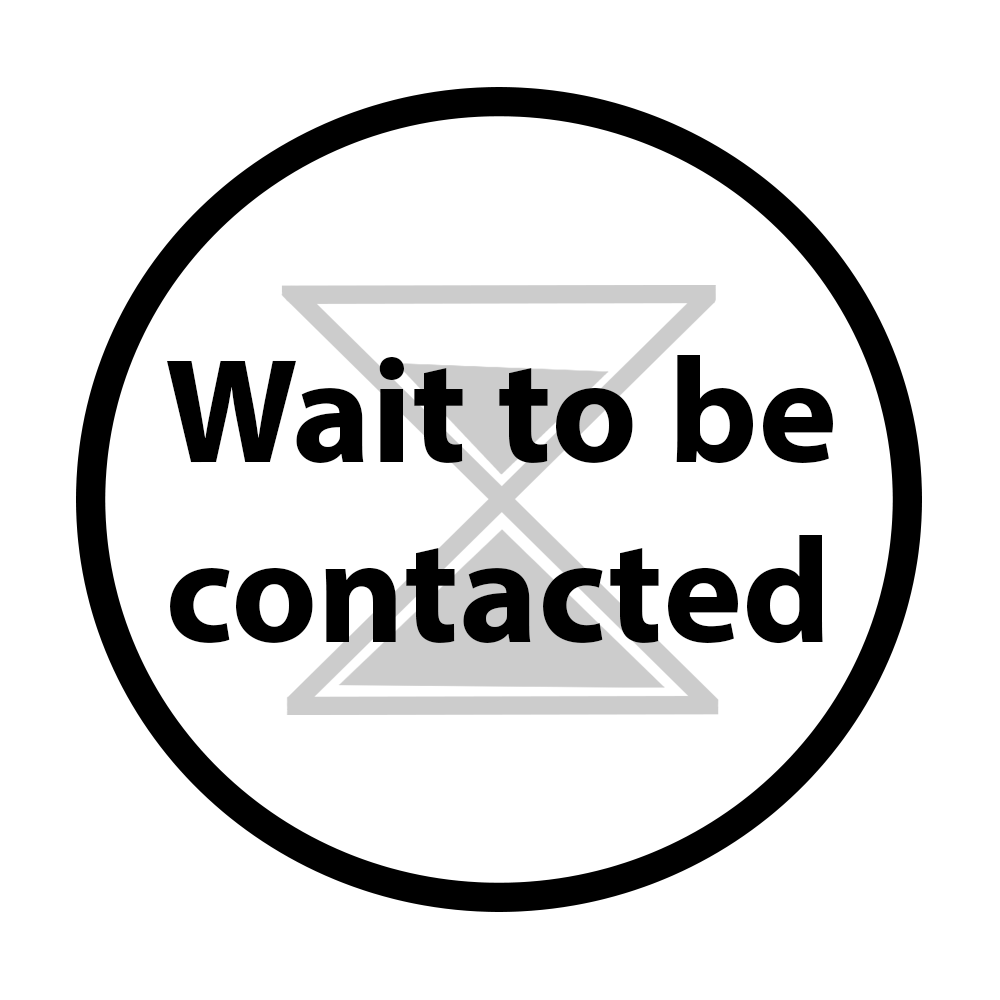
<style>
.page{position:relative;width:1000px;height:1000px;background:#ffffff}
.page>*{position:absolute;margin:0}
.t1{font:150px "MyriadPro-Bold";color:#000000}
</style>
<div class="page">
<p class="t1" style="left:167px;top:355px;width:666px;height:289px">Wait to be<br>contacted</p>
</div>
